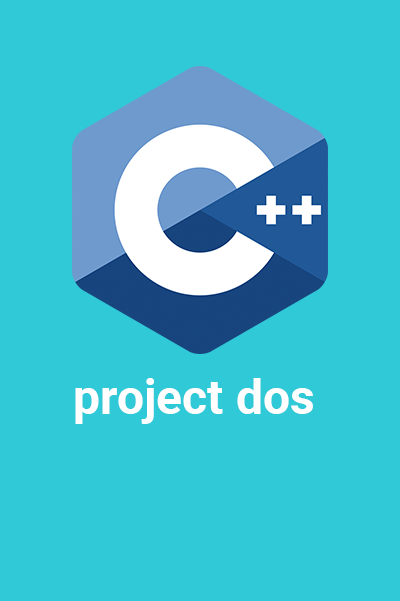
<style>
.page{position:relative;width:400px;height:601px;background:#30c9d7}
.page>*{position:absolute;margin:0}
.t1{font:48px "Roboto-Bold";color:#ffffff}
</style>
<div class="page">
<p class="t1" style="left:75px;top:378px;width:238px;height:46px">project dos</p>
</div>
